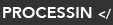
<style>
.page{position:relative;width:113px;height:25px;background:#333333}
.page>*{position:absolute;margin:0}
.t1{font:16.2px "Avenir-Heavy";color:#ffffff}
.t2{font:12.9px "Avenir-Heavy";color:#ffffff}
</style>
<div class="page">
<p class="t1" style="left:3px;top:7px;width:108px;height:12px">PROCESSIN <span class="t2">&lt;/</span></p>
</div>
